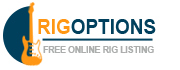
<style>
.page{position:relative;width:180px;height:70px;background:#ffffff}
.page>*{position:absolute;margin:0}
.t1{font:19.7px "Arial-BoldMT";color:#00405d;scale:0.96 1}
.t2{font:19.7px "Arial-BoldMT";color:#ff9715;scale:0.96 1}
.t3{font:9.8px "Arial-BoldMT";color:#acadad;scale:0.87 1}
</style>
<div class="page">
<p class="t1" style="left:38px;top:19px;width:118px;height:15px"><span class="t2">RIG</span>OPTIONS</p>
<p class="t3" style="left:43px;top:46px;width:111px;height:7px">FREE ONLINE RIG LISTING</p>
</div>
